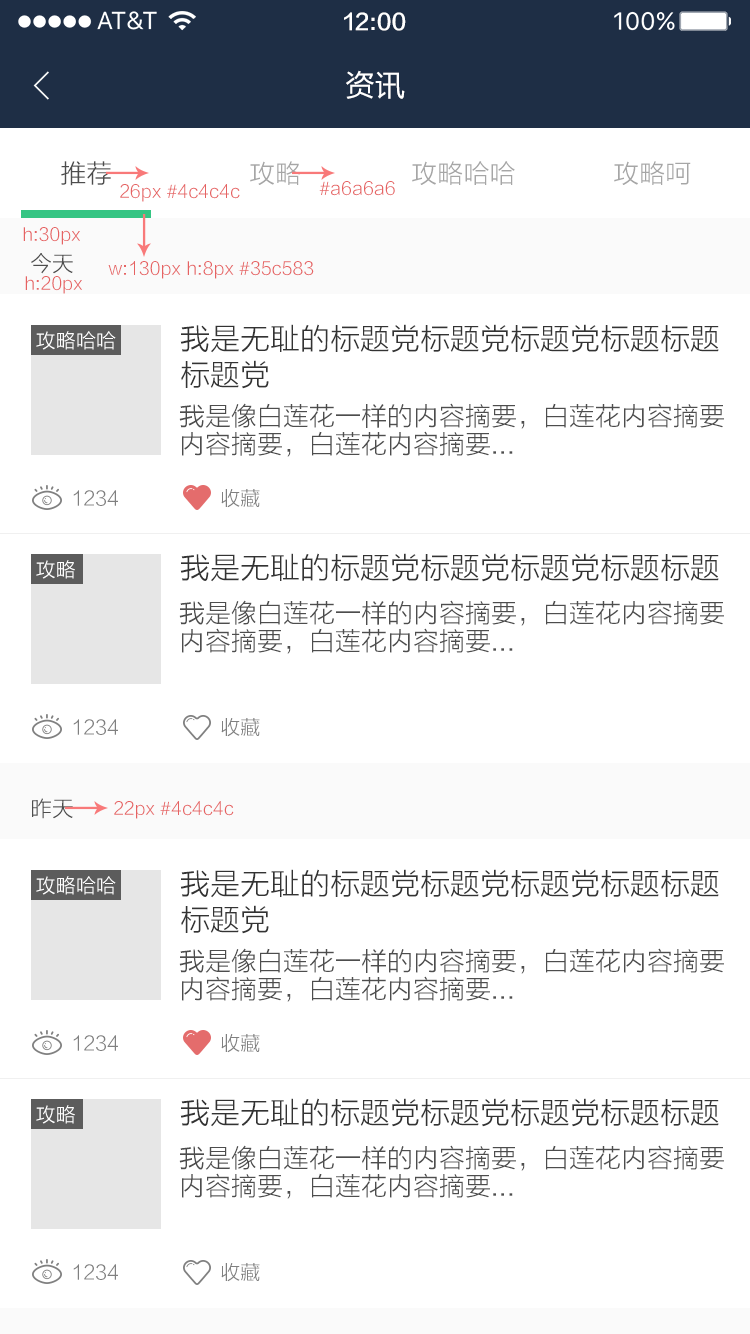
<style>
.page{position:relative;width:750px;height:1334px;background:#ffffff}
.page>*{position:absolute;margin:0}
.t1{font:22px "FZLTZHK--GBK1-0";color:#ffffff}
.t2{font:30px "FZLTHJW--GB1-0";color:#ffffff}
.t3{font:26px "FZLTXHK";color:#4d4d4d}
.t4{font:26px "FZLTXHK";color:#a6a6a6}
.t5{font:18px "FZLTXHK";color:#e66262}
.t6{font:22px "FZLTXHK";color:#4d4d4d}
.t7{font:30px/36px "FZLTXHK";color:#333333}
.t8{font:20px "FZLTXHK";color:#ffffff}
.t9{font:26px/28px "FZLTXHK";color:#4d4d4d}
.t10{font:20px "FZLTXHK";color:#808080}
.t11{font:30px "FZLTXHK";color:#333333}
</style>
<div class="page">
<p class="t1" style="left:344px;top:12px;width:62px;height:19px">12:00</p>
<p class="t2" style="left:346px;top:70px;width:59px;height:29px">资讯</p>
<p class="t3" style="left:61px;top:161px;width:50px;height:25px">推荐</p>
<p class="t4" style="left:250px;top:161px;width:51px;height:24px">攻略</p>
<p class="t4" style="left:412px;top:161px;width:103px;height:24px">攻略哈哈</p>
<p class="t4" style="left:614px;top:161px;width:77px;height:24px">攻略呵</p>
<p class="t5" style="left:120px;top:184px;width:120px;height:18px">26px #4c4c4c</p>
<p class="t5" style="left:319px;top:181px;width:76px;height:15px">#a6a6a6</p>
<p class="t5" style="left:23px;top:227px;width:57px;height:18px">h:30px</p>
<p class="t6" style="left:31px;top:253px;width:42px;height:21px">今天</p>
<p class="t5" style="left:108px;top:261px;width:206px;height:18px">w:130px h:8px #35c583</p>
<p class="t5" style="left:25px;top:276px;width:57px;height:18px">h:20px</p>
<p class="t7" style="left:180px;top:324px;width:539px;height:65px">我是无耻的标题党标题党标题党标题标题<br>标题党</p>
<p class="t8" style="left:36px;top:331px;width:80px;height:19px">攻略哈哈</p>
<p class="t9" style="left:179px;top:403px;width:545px;height:54px">我是像白莲花一样的内容摘要，白莲花内容摘要<br>内容摘要，白莲花内容摘要...</p>
<p class="t10" style="left:73px;top:490px;width:45px;height:16px">1234</p>
<p class="t10" style="left:221px;top:489px;width:39px;height:19px">收藏</p>
<p class="t11" style="left:180px;top:553px;width:539px;height:29px">我是无耻的标题党标题党标题党标题标题</p>
<p class="t8" style="left:36px;top:560px;width:39px;height:19px">攻略</p>
<p class="t9" style="left:179px;top:600px;width:545px;height:54px">我是像白莲花一样的内容摘要，白莲花内容摘要<br>内容摘要，白莲花内容摘要...</p>
<p class="t10" style="left:73px;top:719px;width:45px;height:16px">1234</p>
<p class="t10" style="left:221px;top:718px;width:39px;height:19px">收藏</p>
<p class="t6" style="left:32px;top:798px;width:41px;height:21px">昨天</p>
<p class="t5" style="left:114px;top:801px;width:120px;height:18px">22px #4c4c4c</p>
<p class="t7" style="left:180px;top:869px;width:539px;height:65px">我是无耻的标题党标题党标题党标题标题<br>标题党</p>
<p class="t8" style="left:36px;top:876px;width:80px;height:19px">攻略哈哈</p>
<p class="t9" style="left:179px;top:948px;width:545px;height:54px">我是像白莲花一样的内容摘要，白莲花内容摘要<br>内容摘要，白莲花内容摘要...</p>
<p class="t10" style="left:73px;top:1035px;width:45px;height:16px">1234</p>
<p class="t10" style="left:221px;top:1034px;width:39px;height:19px">收藏</p>
<p class="t8" style="left:36px;top:1105px;width:39px;height:19px">攻略</p>
<p class="t11" style="left:180px;top:1098px;width:539px;height:29px">我是无耻的标题党标题党标题党标题标题</p>
<p class="t9" style="left:179px;top:1145px;width:545px;height:54px">我是像白莲花一样的内容摘要，白莲花内容摘要<br>内容摘要，白莲花内容摘要...</p>
<p class="t10" style="left:73px;top:1264px;width:45px;height:16px">1234</p>
<p class="t10" style="left:221px;top:1263px;width:39px;height:19px">收藏</p>
</div>
